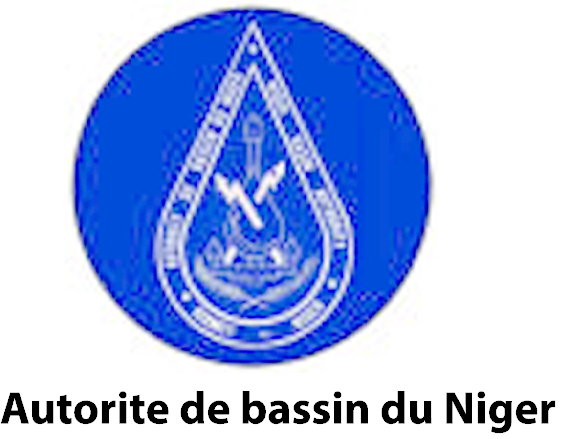
<style>
.page{position:relative;width:572px;height:439px;background:#ffffff}
.page>*{position:absolute;margin:0}
.t1{font:45.8px "MyriadPro-Bold";color:#000000}
</style>
<div class="page">
<p class="t1" style="left:0px;top:391px;width:556px;height:43px">Autorite de bassin du Niger</p>
</div>
